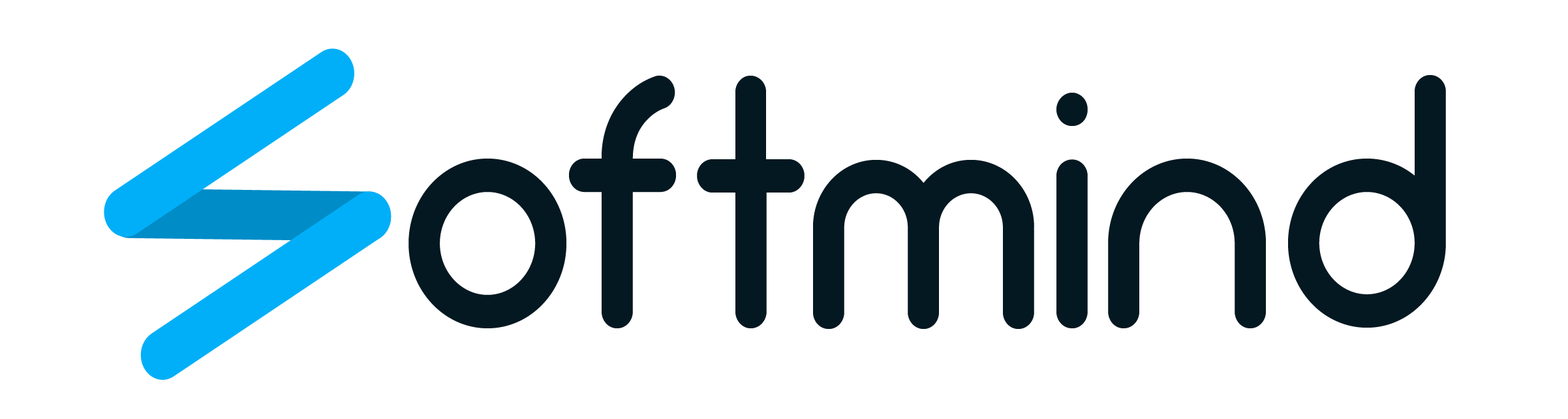
<style>
.page{position:relative;width:1568px;height:419px;background:#ffffff}
.page>*{position:absolute;margin:0}
.t1{font:336.8px "Arciform";letter-spacing:0.01em;color:#041821;scale:0.93 1}
</style>
<div class="page">
<p class="t1" style="left:408px;top:75px;width:1038px;height:254px">oftmind</p>
</div>
